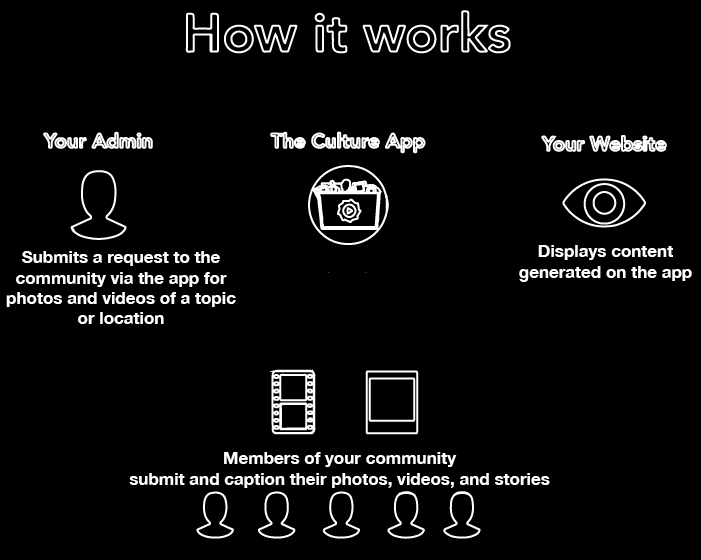
<style>
.page{position:relative;width:701px;height:560px;background:#000000}
.page>*{position:absolute;margin:0}
.t1{font:17px "HelveticaNeue-Bold";color:#ffffff}
</style>
<div class="page">
<p class="t1" style="left:519px;top:245px;width:173px;height:37px;text-align:center">Displays content <br>generated on the app</p>
<p class="t1" style="left:6px;top:251px;width:230px;height:73px;text-align:center">Submits a request to the    community via the app for photos and videos of a topic               or location</p>
<p class="t1" style="left:129px;top:452px;width:421px;height:36px;text-align:center">Members of your community<br>submit and caption their photos, videos, and stories</p>
</div>
